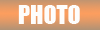
<style>
.page{position:relative;width:100px;height:30px;background:#fefdfc}
.page>*{position:absolute;margin:0}
.t1{font:24px "Impact";color:#fefdfc}
</style>
<div class="page">
<p class="t1" style="left:18px;top:5px;width:62px;height:19px">PHOTO</p>
</div>
